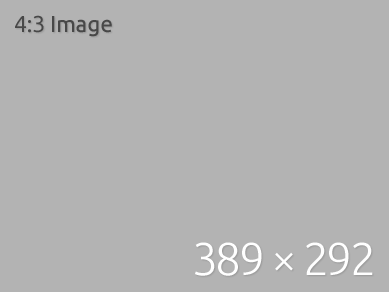
<style>
.page{position:relative;width:389px;height:292px;background:#b3b3b3}
.page>*{position:absolute;margin:0}
.t1{font:23px "Ubuntu";letter-spacing:-0.01em;color:#484848}
.t2{font:46px "Ubuntu-Light";letter-spacing:-0.05em;color:#ffffff}
</style>
<div class="page">
<p class="t1" style="left:15px;top:15px;width:97px;height:22px">4:3 Image</p>
<p class="t2" style="left:195px;top:242px;width:178px;height:34px">389 × 292</p>
</div>
